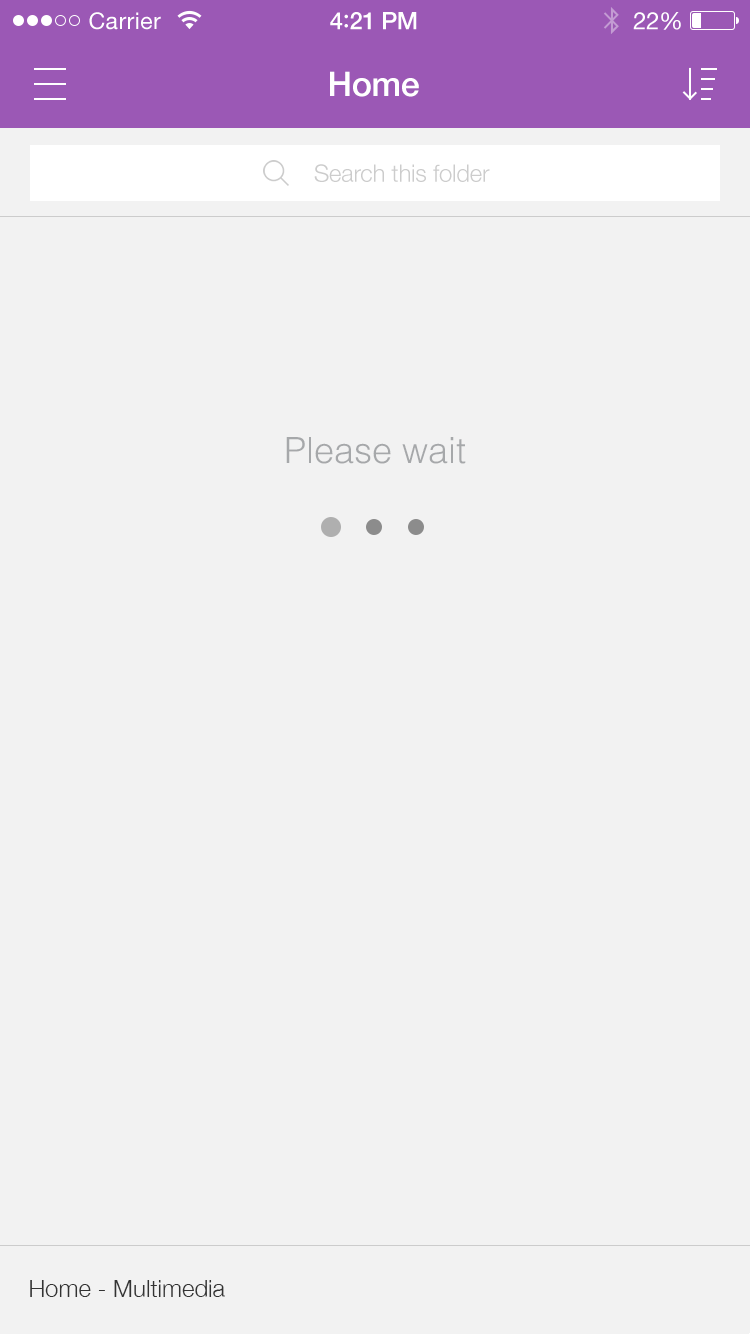
<style>
.page{position:relative;width:750px;height:1334px;background:#f2f2f2}
.page>*{position:absolute;margin:0}
.t1{font:23px "HelveticaNeue";letter-spacing:0.02em;color:#ffffff}
.t2{font:24px "HelveticaNeue-Medium";letter-spacing:-0.02em;color:#ffffff}
.t3{font:26px "Avenir-Medium";letter-spacing:-0.02em;color:#ffffff}
.t4{font:24px "HelveticaNeue";letter-spacing:-0.02em;color:#ffffff}
.t5{font:34px "HelveticaNeue-Medium";letter-spacing:-0.01em;color:#ffffff}
.t6{font:24px "HelveticaNeue-Light";letter-spacing:-0.01em;color:#cccccc}
.t7{font:36px "Helvetica-Light";color:#a6a8aa}
.t8{font:24px "HelveticaNeue-Light";color:#333333}
</style>
<div class="page">
<p class="t1" style="left:89px;top:12px;width:72px;height:18px">Carrier</p>
<p class="t2" style="left:330px;top:12px;width:87px;height:18px">4<span class="t3">:</span>21 PM</p>
<p class="t4" style="left:633px;top:12px;width:48px;height:18px">22%</p>
<p class="t5" style="left:330px;top:71px;width:89px;height:26px">Home</p>
<p class="t6" style="left:314px;top:164px;width:176px;height:18px">Search this folder</p>
<p class="t7" style="left:286px;top:437px;width:180px;height:27px">Please wait</p>
<p class="t8" style="left:30px;top:1280px;width:195px;height:17px">Home - Multimedia</p>
</div>
